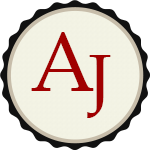
<style>
.page{position:relative;width:150px;height:150px;background:#ffffff}
.page>*{position:absolute;margin:0}
.t1{font:84px "PalatinoLinotype-Roman";color:#a00000}
.t2{font:72px "PalatinoLinotype-Roman";color:#a00000}
</style>
<div class="page">
<p class="t1" style="left:31px;top:32px;width:63px;height:59px">A</p>
<p class="t2" style="left:87px;top:55px;width:24px;height:63px">J</p>
</div>
